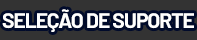
<style>
.page{position:relative;width:197px;height:40px;background:#333333}
.page>*{position:absolute;margin:0}
.t1{font:21px "Barlow-Bold";letter-spacing:-0.05em;color:#ffffff}
</style>
<div class="page">
<p class="t1" style="left:2px;top:9px;width:192px;height:23px">SELEÇÃO DE SUPORTE</p>
</div>
